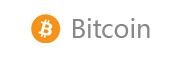
<style>
.page{position:relative;width:188px;height:58px;background:#ffffff}
.page>*{position:absolute;margin:0}
.t1{font:25.3px "MicrosoftYaHei";letter-spacing:-0.01em;color:#878787}
</style>
<div class="page">
<p class="t1" style="left:73px;top:18px;width:77px;height:20px">Bitcoin</p>
</div>
